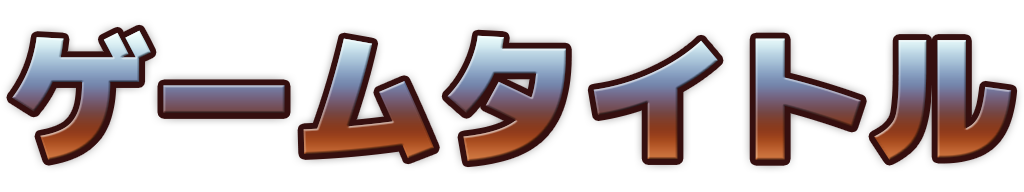
<style>
.page{position:relative;width:1024px;height:192px;background:#ffffff}
.page>*{position:absolute;margin:0}
.t1{font:143.8px "mplus-1p-black"}
</style>
<div class="page">
<p class="t1" style="left:12px;top:30px;width:1000px;height:132px">ゲームタイトル</p>
</div>
